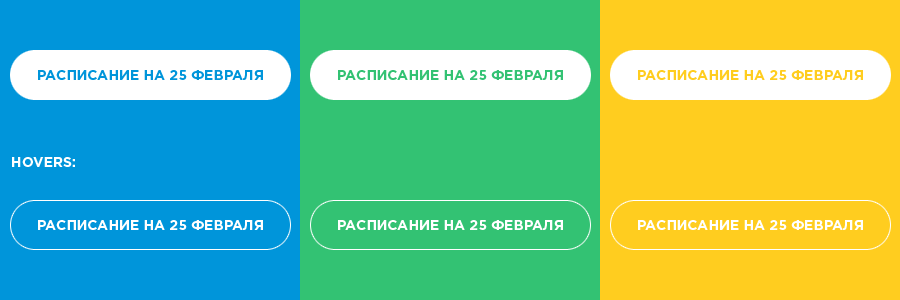
<style>
.page{position:relative;width:900px;height:300px;background:#33c273}
.page>*{position:absolute;margin:0}
.t1{font:14px "GothamPro-Bold";color:#0095da}
.t2{font:14px "GothamPro-Bold";color:#33c273}
.t3{font:14px "GothamPro-Bold";color:#ffcd1f}
.t4{font:14px "GothamPro-Bold";color:#ffffff}
</style>
<div class="page">
<p class="t1" style="left:38px;top:70px;width:225px;height:10px">РАСПИСАНИЕ НА 25 ФЕВРАЛЯ</p>
<p class="t2" style="left:338px;top:70px;width:225px;height:10px">РАСПИСАНИЕ НА 25 ФЕВРАЛЯ</p>
<p class="t3" style="left:638px;top:70px;width:225px;height:10px">РАСПИСАНИЕ НА 25 ФЕВРАЛЯ</p>
<p class="t4" style="left:12px;top:157px;width:63px;height:10px">HOVERS:</p>
<p class="t4" style="left:38px;top:220px;width:225px;height:10px">РАСПИСАНИЕ НА 25 ФЕВРАЛЯ</p>
<p class="t4" style="left:338px;top:220px;width:225px;height:10px">РАСПИСАНИЕ НА 25 ФЕВРАЛЯ</p>
<p class="t4" style="left:638px;top:220px;width:225px;height:10px">РАСПИСАНИЕ НА 25 ФЕВРАЛЯ</p>
</div>
